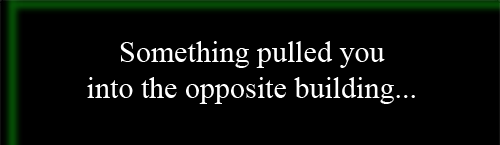
<style>
.page{position:relative;width:500px;height:145px;background:#000000}
.page>*{position:absolute;margin:0}
.t1{font:29.9px "TimesNewRomanPSMT";color:#ffffff}
</style>
<div class="page">
<p class="t1" style="left:87px;top:41px;width:328px;height:63px;text-align:center">Something pulled you <br>into the opposite building...</p>
</div>
